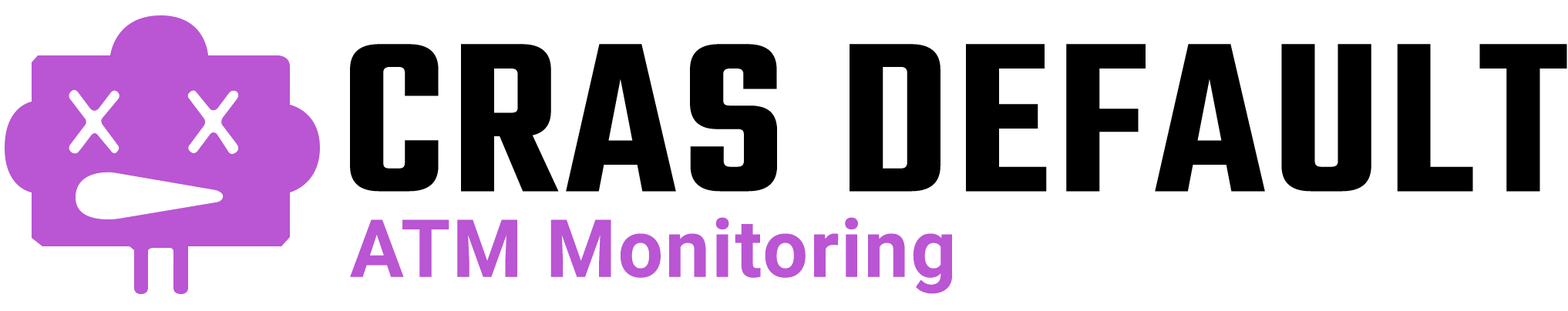
<style>
.page{position:relative;width:1568px;height:311px;background:#ffffff}
.page>*{position:absolute;margin:0}
.t1{font:231.3px "Teko-SemiBold";letter-spacing:0.025em;color:#000000}
.t2{font:80.3px "Roboto-Bold";letter-spacing:0.025em;color:#ba55d3}
</style>
<div class="page">
<p class="t1" style="left:350px;top:44px;width:1217px;height:148px">CRAS DEFAULT</p>
<p class="t2" style="left:350px;top:217px;width:602px;height:77px">ATM Monitoring</p>
</div>
